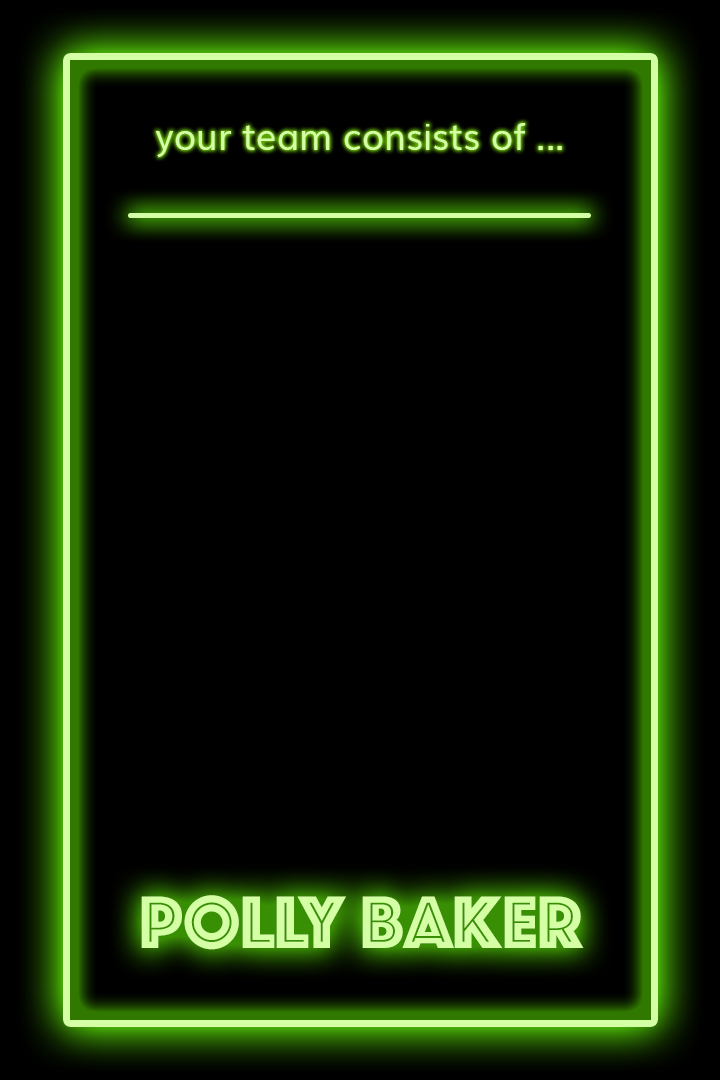
<style>
.page{position:relative;width:720px;height:1080px;background:#000000}
.page>*{position:absolute;margin:0}
.t1{font:36px "Muli";color:#d5ffa4}
.t2{font:77.4px "Phosphate-Inline";color:#d5ffa4}
</style>
<div class="page">
<p class="t1" style="left:155px;top:123px;width:407px;height:35px">your team consists of ...</p>
<p class="t2" style="left:141px;top:895px;width:443px;height:55px">Polly baker</p>
</div>
